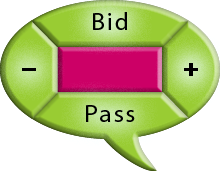
<style>
.page{position:relative;width:220px;height:171px;background:#ffffff}
.page>*{position:absolute;margin:0}
.t1{font:25px "MyriadPro-Regular";letter-spacing:0.08em;color:#000000}
</style>
<div class="page">
<p class="t1" style="left:93px;top:12px;width:34px;height:18px;opacity:0.25">Bid</p>
<p class="t1" style="left:93px;top:12px;width:34px;height:18px">Bid</p>
<p class="t1" style="left:86px;top:105px;width:49px;height:17px">Pass</p>
</div>
